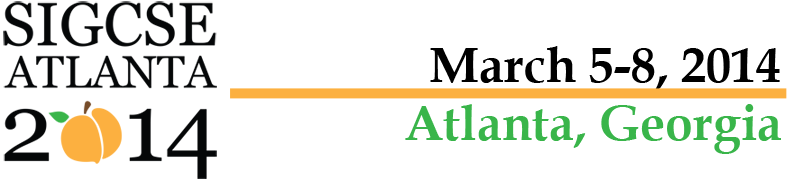
<style>
.page{position:relative;width:800px;height:180px;background:#ffffff}
.page>*{position:absolute;margin:0}
.t1{font:50px "BookAntiqua-Bold";color:#000000}
.t2{font:50px "BookAntiqua-Bold";color:#39b54a}
</style>
<div class="page">
<p class="t1" style="left:430px;top:46px;width:350px;height:44px">March 5-8, 2014</p>
<p class="t2" style="left:405px;top:104px;width:376px;height:50px">Atlanta, Georgia</p>
</div>
